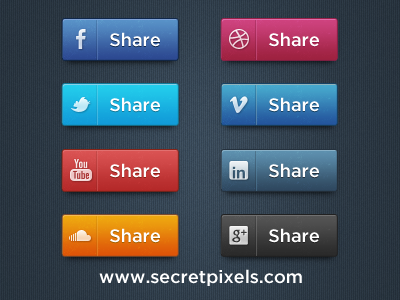
<style>
.page{position:relative;width:400px;height:300px}
.page>*{position:absolute;margin:0}
.t1{font:18px "Gotham-Medium";color:#ffffff}
</style>
<div class="page">
<p class="t1" style="left:110px;top:32px;width:50px;height:15px">Share</p>
<p class="t1" style="left:269px;top:32px;width:50px;height:15px">Share</p>
<p class="t1" style="left:110px;top:97px;width:50px;height:15px">Share</p>
<p class="t1" style="left:269px;top:97px;width:50px;height:15px">Share</p>
<p class="t1" style="left:110px;top:163px;width:50px;height:15px">Share</p>
<p class="t1" style="left:269px;top:163px;width:50px;height:15px">Share</p>
<p class="t1" style="left:110px;top:228px;width:50px;height:15px">Share</p>
<p class="t1" style="left:269px;top:228px;width:50px;height:15px">Share</p>
<p class="t1" style="left:99px;top:269px;width:203px;height:17px">www.secretpixels.com</p>
</div>
